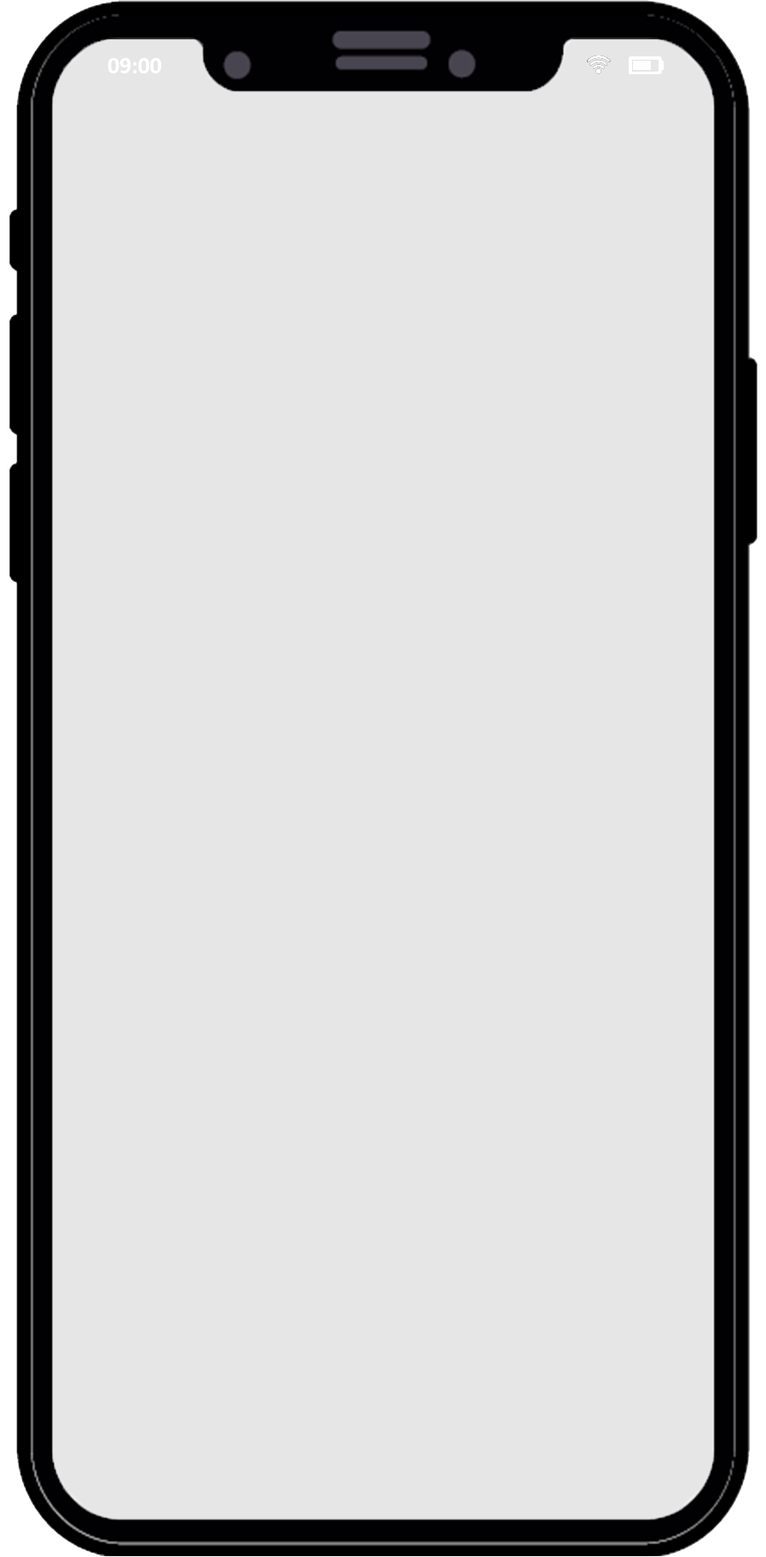
<style>
.page{position:relative;width:766px;height:1557px;background:#e6e6e6}
.page>*{position:absolute;margin:0}
.t1{font:23.6px "Calibri-Bold";color:#ffffff}
</style>
<div class="page">
<p class="t1" style="left:107px;top:58px;width:54px;height:15px">09:00</p>
</div>
